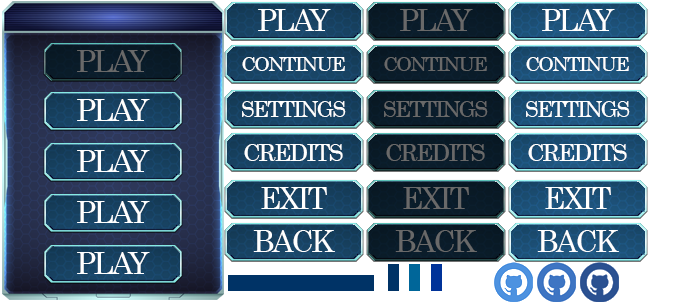
<style>
.page{position:relative;width:675px;height:303px}
.page>*{position:absolute;margin:0}
.t1{font:30px "Century";letter-spacing:-0.075em;color:#ffffff}
.t2{font:30px "Century";letter-spacing:-0.075em;color:#696969}
.t3{font:20px "Century";letter-spacing:-0.075em;color:#ffffff}
.t4{font:20px "Century";letter-spacing:-0.075em;color:#696969}
.t5{font:22px "Century";letter-spacing:-0.075em;color:#ffffff}
.t6{font:22px "Century";letter-spacing:-0.075em;color:#696969}
.t7{font:24px "Century";letter-spacing:-0.075em;color:#ffffff}
.t8{font:24px "Century";letter-spacing:-0.075em;color:#696969}
</style>
<div class="page">
<p class="t1" style="left:258px;top:9px;width:73px;height:22px">PLAY</p>
<p class="t2" style="left:400px;top:9px;width:73px;height:22px">PLAY</p>
<p class="t1" style="left:542px;top:9px;width:73px;height:22px">PLAY</p>
<p class="t2" style="left:77px;top:50px;width:73px;height:22px">PLAY</p>
<p class="t3" style="left:242px;top:57px;width:103px;height:14px">CONTINUE</p>
<p class="t4" style="left:384px;top:57px;width:103px;height:14px">CONTINUE</p>
<p class="t3" style="left:526px;top:57px;width:103px;height:14px">CONTINUE</p>
<p class="t1" style="left:77px;top:99px;width:73px;height:22px">PLAY</p>
<p class="t5" style="left:242px;top:101px;width:104px;height:16px">SETTINGS</p>
<p class="t6" style="left:384px;top:101px;width:104px;height:16px">SETTINGS</p>
<p class="t5" style="left:526px;top:101px;width:104px;height:16px">SETTINGS</p>
<p class="t1" style="left:77px;top:150px;width:73px;height:22px">PLAY</p>
<p class="t7" style="left:244px;top:144px;width:99px;height:17px">CREDITS</p>
<p class="t8" style="left:386px;top:144px;width:99px;height:17px">CREDITS</p>
<p class="t7" style="left:528px;top:144px;width:99px;height:17px">CREDITS</p>
<p class="t1" style="left:261px;top:187px;width:66px;height:22px">EXIT</p>
<p class="t2" style="left:403px;top:187px;width:66px;height:22px">EXIT</p>
<p class="t1" style="left:545px;top:187px;width:66px;height:22px">EXIT</p>
<p class="t1" style="left:77px;top:201px;width:73px;height:22px">PLAY</p>
<p class="t1" style="left:253px;top:230px;width:82px;height:22px">BACK</p>
<p class="t2" style="left:395px;top:230px;width:82px;height:22px">BACK</p>
<p class="t1" style="left:537px;top:230px;width:82px;height:22px">BACK</p>
<p class="t1" style="left:77px;top:252px;width:73px;height:22px">PLAY</p>
</div>
